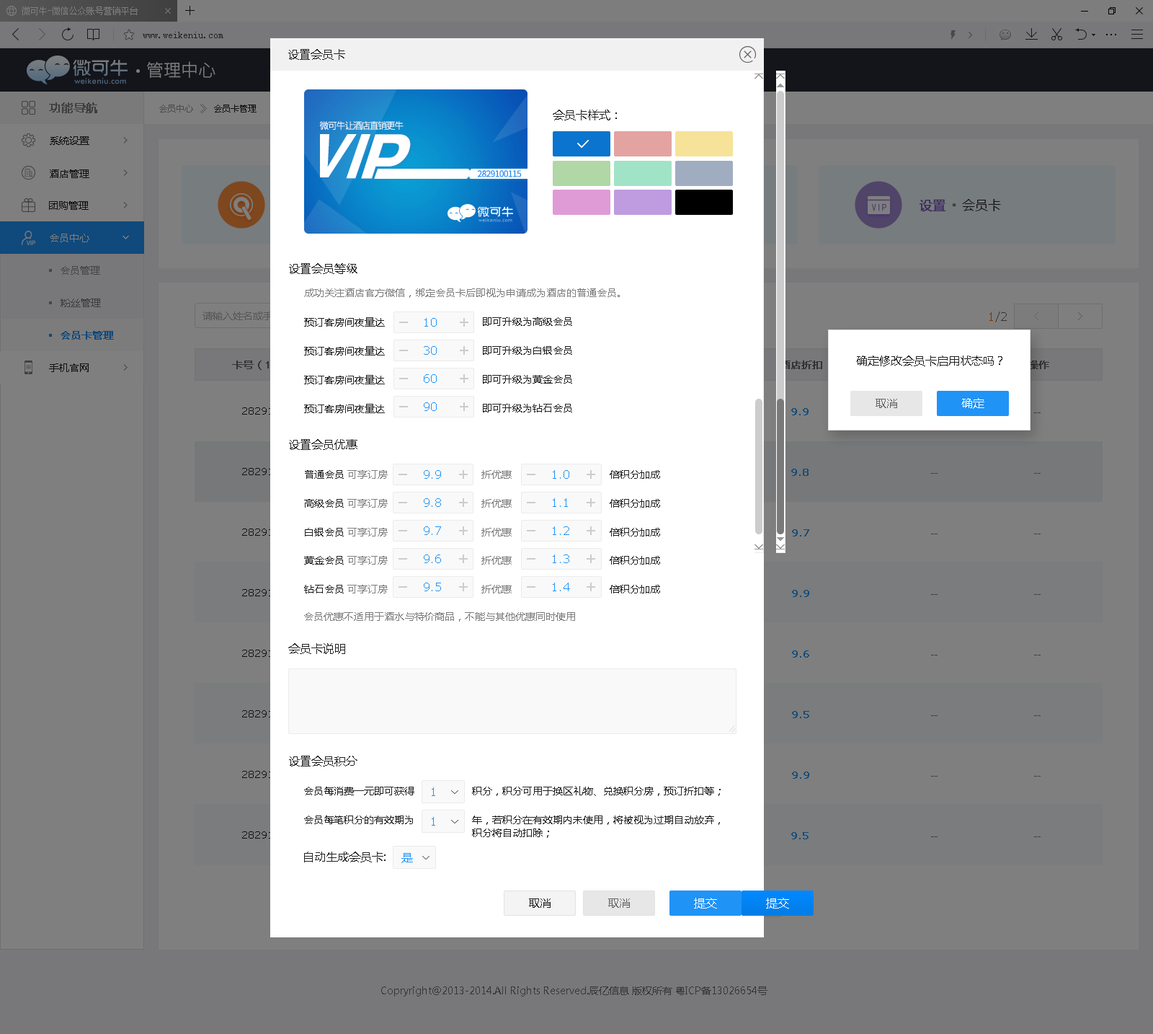
<style>
.page{position:relative;width:1153px;height:1034px;background:#7f7f7f}
.page>*{position:absolute;margin:0}
.t1{font:11.5px "MicrosoftYaHei";color:#222222}
.t2{font:9.2px "SourceHanSansCN-Light";letter-spacing:-0.1em;color:#ffffff}
.t3{font:61px "CTCuHeiSJ";color:#ffffff;font-style:italic;scale:0.96 1}
.t4{font:70.9px "CTCuHeiSJ";color:#ffffff;font-style:italic}
.t5{font:8.7px "SourceHanSansCN-Regular";letter-spacing:-0.05em;color:#2093f7}
.t6{font:10.1px "MicrosoftYaHei";color:#7d7d7d}
.t7{font:10.1px "MicrosoftYaHei";color:#222222}
.t8{font:11.5px "Verdana";color:#2093f7}
.t9{font:11.5px "MicrosoftYaHei";color:#666666}
.t10{font:11.5px "MicrosoftYaHei";color:#fefefe}
.t11{font:10.1px/13px "MicrosoftYaHei";color:#222222}
.t12{font:11.5px "MicrosoftYaHei";color:#2093f7}
.t13{font:11.5px "MicrosoftYaHei";color:#ffffff}
</style>
<div class="page">
<p class="t1" style="left:288px;top:49px;width:57px;height:11px">设置会员卡</p>
<p class="t1" style="left:553px;top:110px;width:64px;height:10px">会员卡样式：</p>
<p class="t2" style="left:319px;top:121px;width:85px;height:9px">微可牛让酒店直销更牛</p>
<p class="t3" style="left:320px;top:134px;width:37px;height:43px">V</p>
<p class="t4" style="left:359px;top:134px;width:52px;height:51px">P</p>
<p class="t5" style="left:477px;top:170px;width:45px;height:7px">2829100115</p>
<p class="t1" style="left:289px;top:263px;width:69px;height:11px">设置会员等级</p>
<p class="t6" style="left:304px;top:288px;width:316px;height:10px">成功关注酒店官方微信，绑定会员卡后即视为申请成为酒店的普通会员。</p>
<p class="t7" style="left:304px;top:317px;width:81px;height:10px">预订客房间夜量达</p>
<p class="t8" style="left:425px;top:318px;width:12px;height:9px">10</p>
<p class="t7" style="left:483px;top:317px;width:89px;height:9px">即可升级为高级会员</p>
<p class="t7" style="left:304px;top:346px;width:81px;height:9px">预订客房间夜量达</p>
<p class="t8" style="left:424px;top:346px;width:13px;height:9px">30</p>
<p class="t7" style="left:483px;top:346px;width:89px;height:9px">即可升级为白银会员</p>
<p class="t1" style="left:856px;top:355px;width:147px;height:11px">确定修改会员卡启用状态吗？</p>
<p class="t7" style="left:304px;top:375px;width:81px;height:9px">预订客房间夜量达</p>
<p class="t8" style="left:424px;top:374px;width:13px;height:9px">60</p>
<p class="t7" style="left:483px;top:375px;width:89px;height:9px">即可升级为黄金会员</p>
<p class="t9" style="left:876px;top:399px;width:22px;height:9px">取消</p>
<p class="t10" style="left:962px;top:398px;width:23px;height:11px">确定</p>
<p class="t7" style="left:304px;top:404px;width:81px;height:9px">预订客房间夜量达</p>
<p class="t8" style="left:424px;top:402px;width:13px;height:9px">90</p>
<p class="t7" style="left:483px;top:404px;width:89px;height:8px">即可升级为钻石会员</p>
<p class="t1" style="left:289px;top:439px;width:69px;height:11px">设置会员优惠</p>
<p class="t7" style="left:305px;top:470px;width:83px;height:9px">普通会员 <span class="t6">可享订房</span></p>
<p class="t8" style="left:424px;top:470px;width:17px;height:9px">9.9</p>
<p class="t6" style="left:482px;top:470px;width:30px;height:9px">折优惠</p>
<p class="t8" style="left:553px;top:470px;width:17px;height:9px">1.0</p>
<p class="t7" style="left:610px;top:470px;width:50px;height:9px">倍积分加成</p>
<p class="t7" style="left:304px;top:499px;width:84px;height:9px">高级会员 <span class="t6">可享订房</span></p>
<p class="t8" style="left:424px;top:498px;width:17px;height:9px">9.8</p>
<p class="t6" style="left:482px;top:499px;width:30px;height:9px">折优惠</p>
<p class="t8" style="left:553px;top:498px;width:15px;height:9px">1.1</p>
<p class="t7" style="left:610px;top:499px;width:50px;height:9px">倍积分加成</p>
<p class="t7" style="left:305px;top:528px;width:83px;height:8px">白银会员 <span class="t6">可享订房</span></p>
<p class="t8" style="left:424px;top:526px;width:17px;height:9px">9.7</p>
<p class="t6" style="left:482px;top:528px;width:30px;height:8px">折优惠</p>
<p class="t8" style="left:553px;top:526px;width:17px;height:9px">1.2</p>
<p class="t7" style="left:610px;top:528px;width:50px;height:8px">倍积分加成</p>
<p class="t7" style="left:304px;top:556px;width:84px;height:8px">黄金会员 <span class="t6">可享订房</span></p>
<p class="t8" style="left:424px;top:554px;width:17px;height:9px">9.6</p>
<p class="t6" style="left:482px;top:556px;width:30px;height:8px">折优惠</p>
<p class="t8" style="left:553px;top:554px;width:17px;height:9px">1.3</p>
<p class="t7" style="left:610px;top:556px;width:50px;height:8px">倍积分加成</p>
<p class="t7" style="left:304px;top:585px;width:84px;height:8px">钻石会员 <span class="t6">可享订房</span></p>
<p class="t8" style="left:424px;top:582px;width:17px;height:9px">9.5</p>
<p class="t6" style="left:482px;top:585px;width:30px;height:8px">折优惠</p>
<p class="t8" style="left:553px;top:582px;width:17px;height:9px">1.4</p>
<p class="t7" style="left:610px;top:585px;width:50px;height:8px">倍积分加成</p>
<p class="t6" style="left:304px;top:612px;width:271px;height:9px">会员优惠不适用于酒水与特价商品，不能与其他优惠同时使用</p>
<p class="t1" style="left:288px;top:643px;width:57px;height:11px">会员卡说明</p>
<p class="t1" style="left:289px;top:756px;width:69px;height:10px">设置会员积分</p>
<p class="t7" style="left:472px;top:786px;width:249px;height:10px">积分，积分可用于换区礼物、兑换积分房，预订折扣等；</p>
<p class="t7" style="left:304px;top:787px;width:111px;height:8px">会员每消费一元即可获得</p>
<p class="t8" style="left:432px;top:787px;width:3px;height:9px">1</p>
<p class="t7" style="left:304px;top:815px;width:109px;height:9px">会员每笔积分的有效期为</p>
<p class="t8" style="left:432px;top:817px;width:3px;height:8px">1</p>
<p class="t11" style="left:472px;top:815px;width:248px;height:23px">年，若积分在有效期内未使用，将被视为过期自动放弃，<br>积分将自动扣除；</p>
<p class="t1" style="left:304px;top:851px;width:82px;height:11px">自动生成会员卡:</p>
<p class="t12" style="left:402px;top:853px;width:11px;height:10px">是</p>
<p class="t1" style="left:529px;top:898px;width:22px;height:10px">取消</p>
<p class="t9" style="left:608px;top:898px;width:22px;height:10px">取消</p>
<p class="t13" style="left:694px;top:898px;width:23px;height:10px">提交</p>
<p class="t13" style="left:766px;top:898px;width:23px;height:10px">提交</p>
</div>
